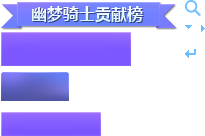
<style>
.page{position:relative;width:205px;height:136px;background:#ffffff}
.page>*{position:absolute;margin:0}
.t1{font:16px "MicrosoftYaHei-Bold";color:#ecfbfe}
</style>
<div class="page">
<p class="t1" style="left:32px;top:6px;width:111px;height:17px">幽梦骑士贡献榜</p>
</div>
